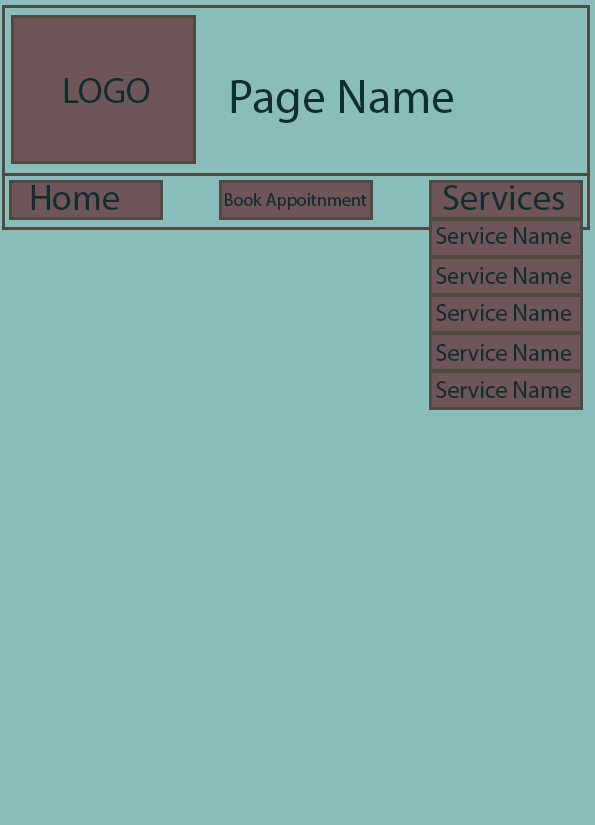
<style>
.page{position:relative;width:595px;height:825px;background:#88bdbc}
.page>*{position:absolute;margin:0}
.t1{font:36px "MyriadPro-Regular";color:#112d32}
.t2{font:18px "MyriadPro-Regular";color:#112d32}
.t3{font:48px "MyriadPro-Regular";color:#112d32}
.t4{font:24px "MyriadPro-Regular";color:#112d32}
.t5{font:23.9px "MyriadPro-Regular";color:#112d32}
</style>
<div class="page">
<p class="t1" style="left:64px;top:78px;width:86px;height:25px"><span class="t2"><br><br>     </span>LOGO</p>
<p class="t3" style="left:231px;top:80px;width:222px;height:43px">Page Name</p>
<p class="t1" style="left:31px;top:185px;width:88px;height:25px">Home</p>
<p class="t1" style="left:443px;top:185px;width:121px;height:25px">Services</p>
<p class="t2" style="left:225px;top:193px;width:142px;height:17px">Book Appoitnment</p>
<p class="t4" style="left:436px;top:227px;width:136px;height:17px">Service Name</p>
<p class="t4" style="left:436px;top:267px;width:136px;height:17px">Service Name</p>
<p class="t5" style="left:436px;top:304px;width:136px;height:17px">Service Name</p>
<p class="t5" style="left:436px;top:344px;width:136px;height:17px">Service Name</p>
<p class="t5" style="left:436px;top:381px;width:136px;height:17px">Service Name</p>
</div>
